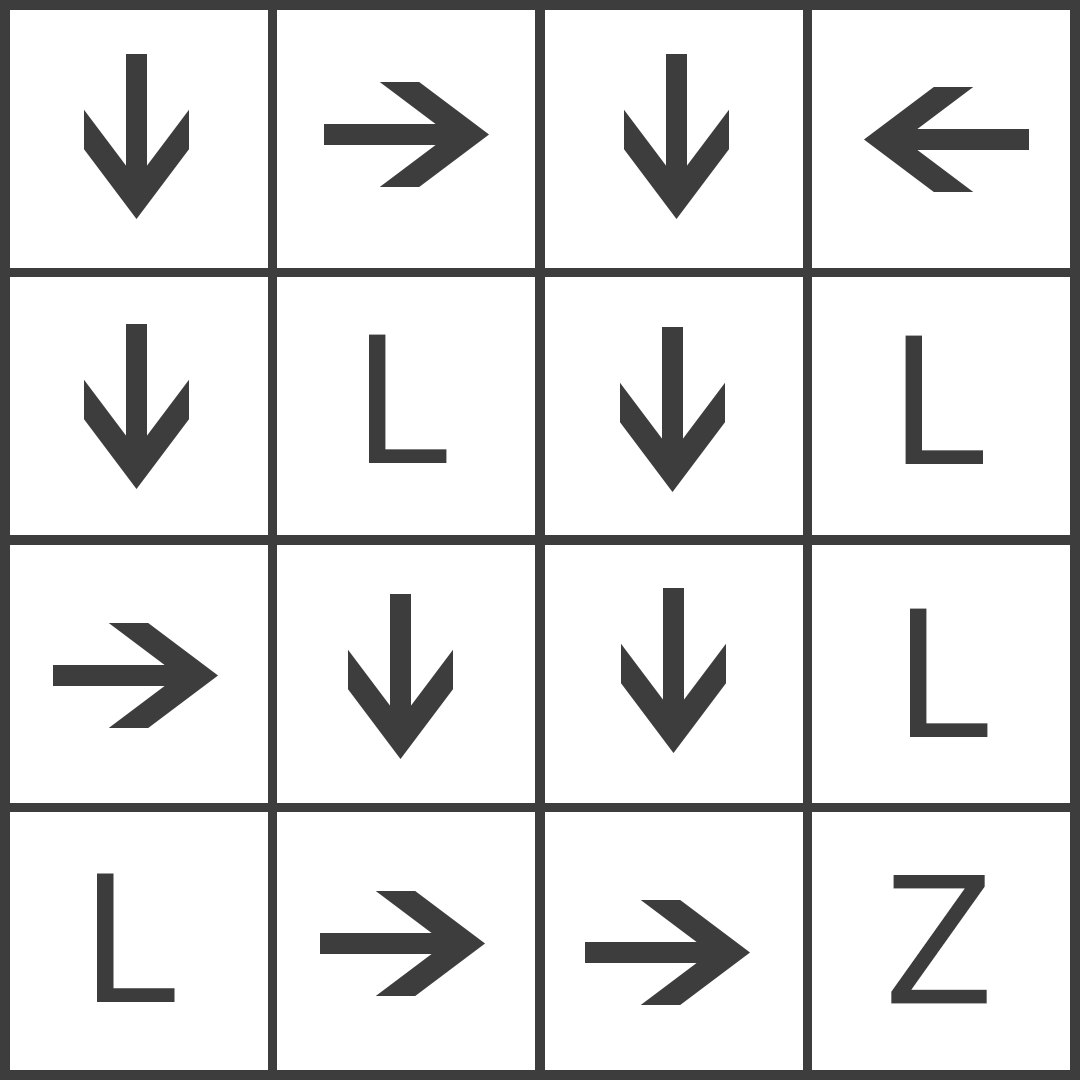
<style>
.page{position:relative;width:1080px;height:1080px;background:#ffffff}
.page>*{position:absolute;margin:0}
.t1{font:180px "OpenSans-Regular";letter-spacing:0.06em;color:#3c3c3c;scale:1.08 1}
</style>
<div class="page">
<p class="t1" style="left:369px;top:334px;width:78px;height:129px">L</p>
<p class="t1" style="left:905px;top:335px;width:78px;height:129px">L</p>
<p class="t1" style="left:910px;top:608px;width:78px;height:129px">L</p>
<p class="t1" style="left:891px;top:875px;width:96px;height:129px">Z</p>
</div>
